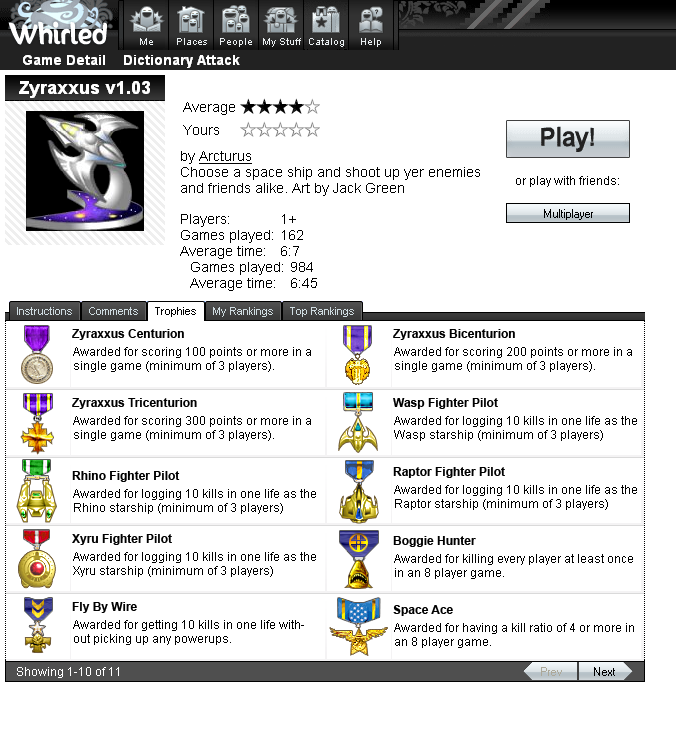
<style>
.page{position:relative;width:676px;height:737px;background:#ffffff}
.page>*{position:absolute;margin:0}
.t1{font:12px "Arial-BoldMT";color:#000000}
.t2{font:12px "ArialMT";color:#000000}
</style>
<div class="page">
<p class="t1" style="left:72px;top:329px;width:112px;height:11px">Zyraxxus Centurion</p>
<p class="t1" style="left:393px;top:329px;width:122px;height:11px">Zyraxxus Bicenturion</p>
<p class="t2" style="left:73px;top:347px;width:238px;height:25px">Awarded for scoring 100 points or more in a<br>single game (minimum of 3 players).</p>
<p class="t2" style="left:394px;top:347px;width:238px;height:25px">Awarded for scoring 200 points or more in a<br>single game (minimum of 3 players).</p>
<p class="t1" style="left:72px;top:398px;width:125px;height:11px">Zyraxxus Tricenturion</p>
<p class="t1" style="left:393px;top:398px;width:105px;height:11px">Wasp Fighter Pilot</p>
<p class="t2" style="left:73px;top:416px;width:238px;height:25px">Awarded for scoring 300 points or more in a<br>single game (minimum of 3 players).</p>
<p class="t2" style="left:394px;top:416px;width:243px;height:25px">Awarded for logging 10 kills in one life as the<br>Wasp starship (minimum of 3 players)</p>
<p class="t1" style="left:72px;top:471px;width:108px;height:11px">Rhino Fighter Pilot</p>
<p class="t1" style="left:393px;top:467px;width:112px;height:11px">Raptor Fighter Pilot</p>
<p class="t2" style="left:394px;top:485px;width:243px;height:25px">Awarded for logging 10 kills in one life as the<br>Raptor starship (minimum of 3 players)</p>
<p class="t2" style="left:73px;top:489px;width:243px;height:25px">Awarded for logging 10 kills in one life as the<br>Rhino starship (minimum of 3 players)</p>
<p class="t1" style="left:72px;top:534px;width:100px;height:11px">Xyru Fighter Pilot</p>
<p class="t1" style="left:393px;top:536px;width:83px;height:11px">Boggie Hunter</p>
<p class="t2" style="left:73px;top:552px;width:243px;height:25px">Awarded for logging 10 kills in one life as the<br>Xyru starship (minimum of 3 players)</p>
<p class="t2" style="left:394px;top:554px;width:239px;height:25px">Awarded for killing every player at least once<br>in an 8 player game.</p>
<p class="t1" style="left:72px;top:602px;width:65px;height:11px">Fly By Wire</p>
<p class="t1" style="left:393px;top:605px;width:60px;height:11px">Space Ace</p>
<p class="t2" style="left:73px;top:620px;width:231px;height:25px">Awarded for getting 10 kills in one life with-<br>out picking up any powerups.</p>
<p class="t2" style="left:394px;top:623px;width:240px;height:25px">Awarded for having a kill ratio of 4 or more in<br>an 8 player game.</p>
</div>
